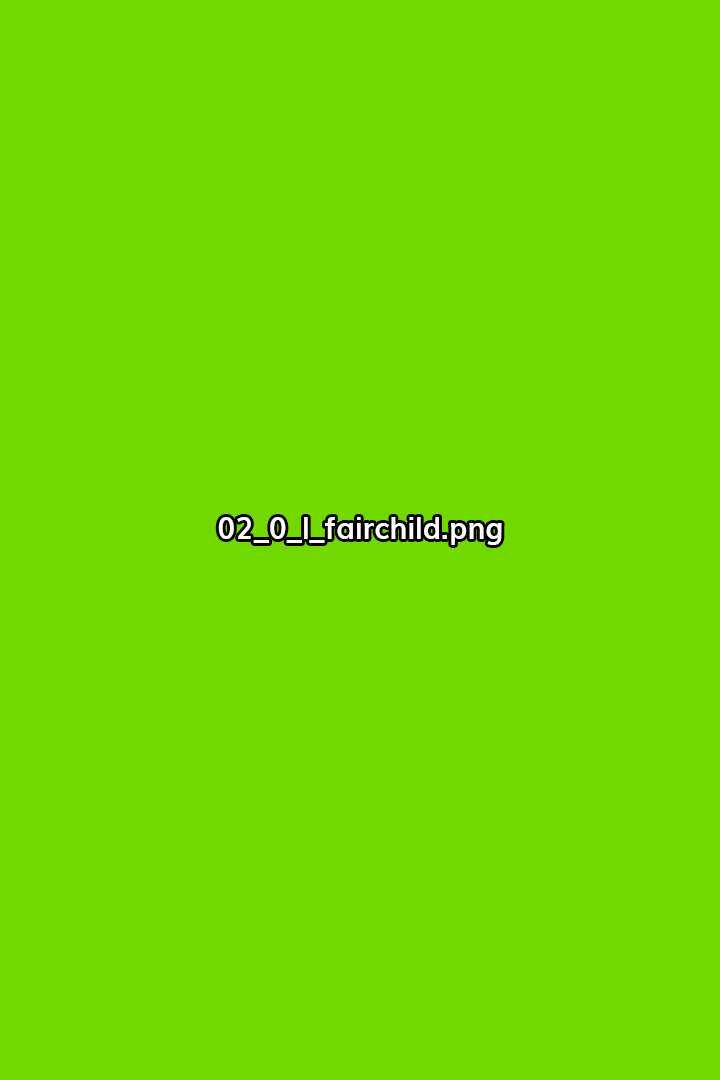
<style>
.page{position:relative;width:720px;height:1080px;background:#73d700}
.page>*{position:absolute;margin:0}
.t1{font:31.4px "Muli-Bold";color:#ffffff;scale:0.95 1}
</style>
<div class="page">
<p class="t1" style="left:218px;top:517px;width:284px;height:28px">02_0_l_fairchild.png</p>
</div>
